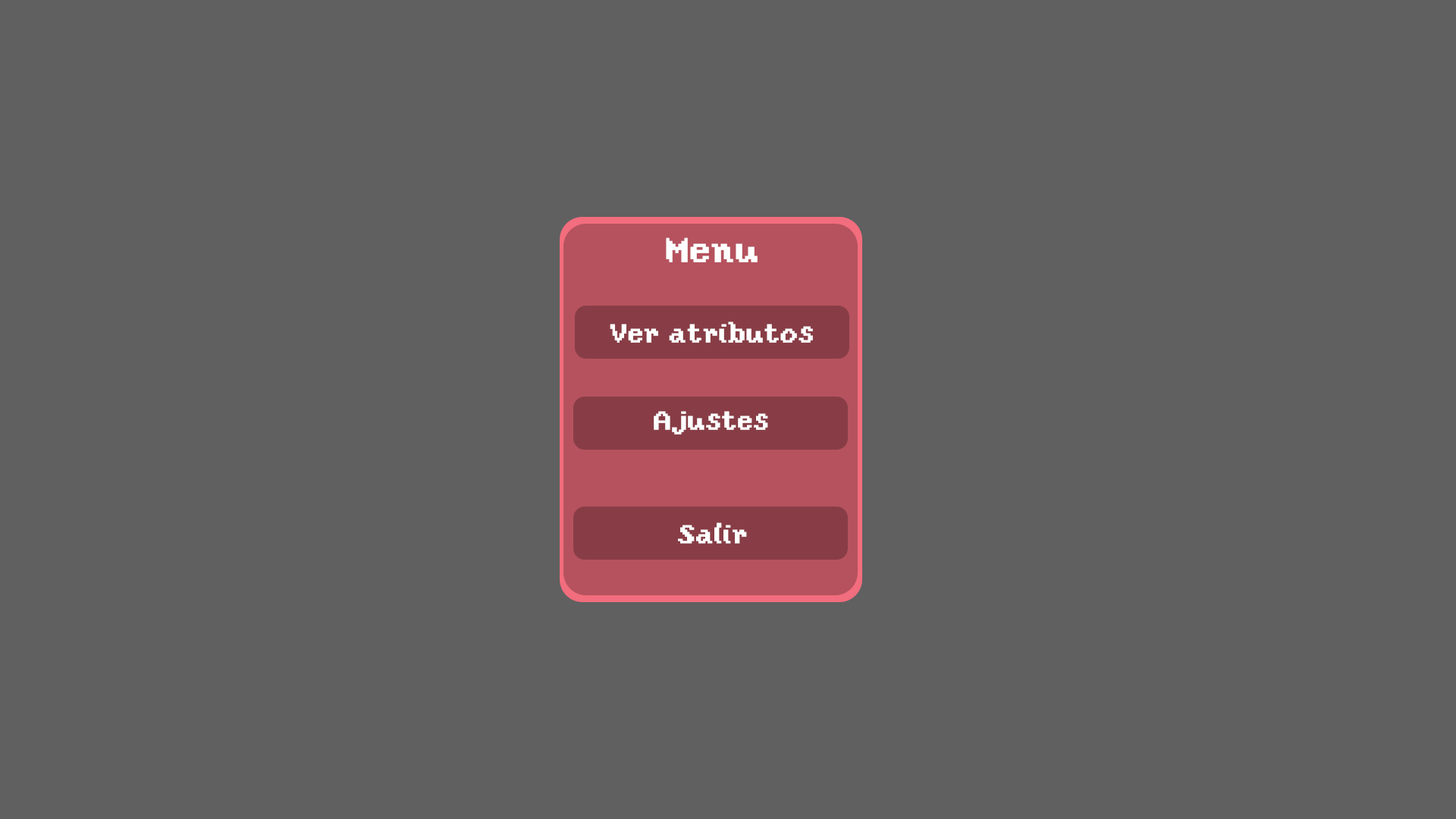
<style>
.page{position:relative;width:1456px;height:819px;background:#606060}
.page>*{position:absolute;margin:0}
.t1{font:36.4px "YosterIslandReg";color:#ffffff}
.t2{font:27.3px "YosterIslandReg";color:#ffffff}
</style>
<div class="page">
<p class="t1" style="left:666px;top:237px;width:92px;height:25px">Menu</p>
<p class="t2" style="left:610px;top:322px;width:203px;height:21px">Ver atributos</p>
<p class="t2" style="left:654px;top:411px;width:114px;height:24px">Ajustes</p>
<p class="t2" style="left:678px;top:522px;width:69px;height:22px">Salir</p>
</div>
